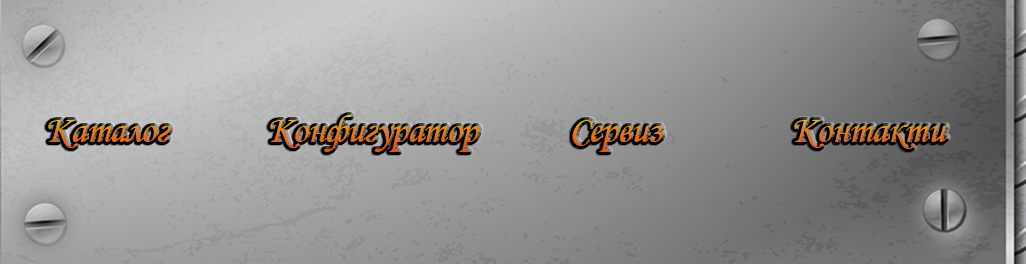
<style>
.page{position:relative;width:1026px;height:264px}
.page>*{position:absolute;margin:0}
.t1{font:39.4px "MonotypeCorsiva";letter-spacing:-0.025em;color:#ee8310}
</style>
<div class="page">
<p class="t1" style="left:48px;top:115px;width:899px;height:37px">Каталог             Конфигуратор            Сервиз                 Контакти</p>
</div>
